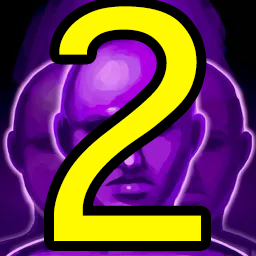
<style>
.page{position:relative;width:256px;height:256px}
.page>*{position:absolute;margin:0}
.t1{font:300px "Geneva";color:#fffa00}
</style>
<div class="page">
<p class="t1" style="left:54px;top:6px;width:147px;height:235px">2</p>
</div>
